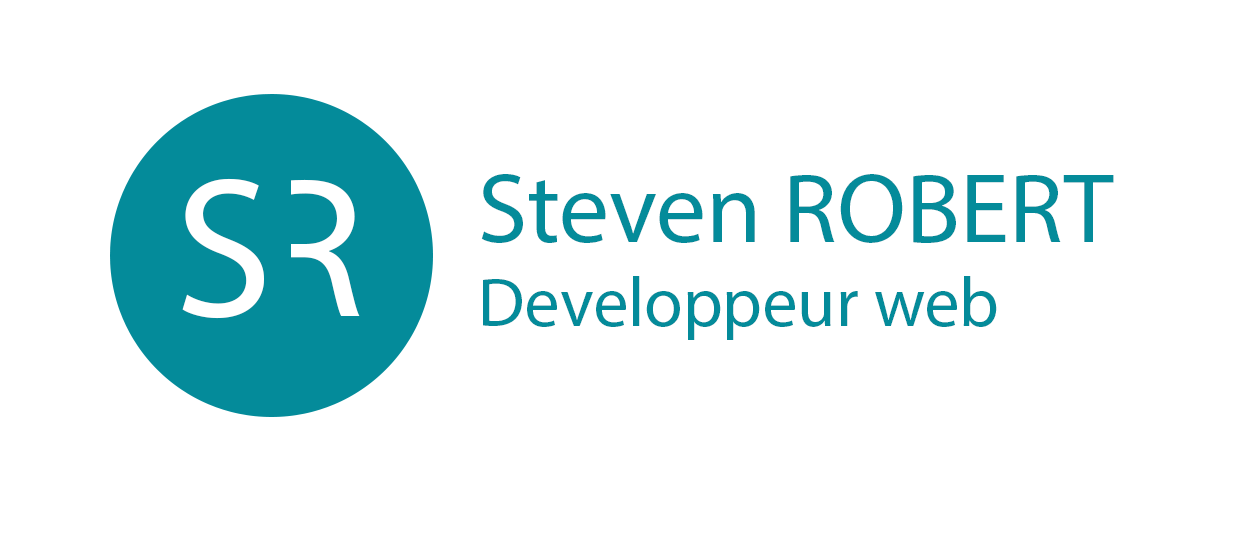
<style>
.page{position:relative;width:1250px;height:534px;background:#ffffff}
.page>*{position:absolute;margin:0}
.t1{font:70px "MyriadPro-Regular";color:#048b9a}
.t2{font:100px "MyriadPro-Regular";color:#048b9a}
.t3{font:200px "MyriadPro-Regular";letter-spacing:-0.08em;color:#ffffff}
</style>
<div class="page">
<p class="t1" style="left:481px;top:174px;width:633px;height:166px"><span class="t2">Steven ROBERT<br></span>Developpeur web</p>
<p class="t3" style="left:182px;top:178px;width:178px;height:141px">SR</p>
</div>
